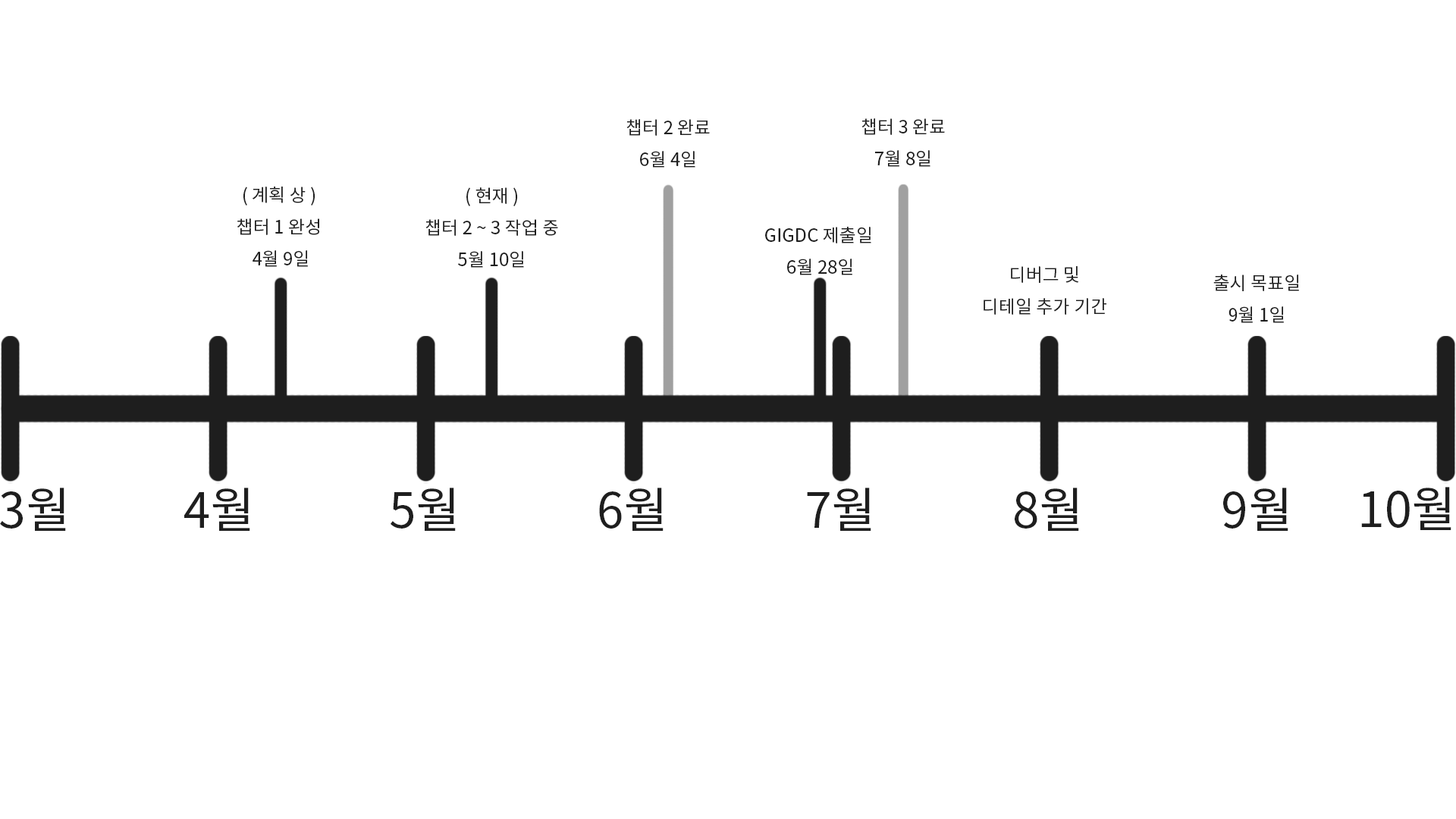
<style>
.page{position:relative;width:1456px;height:819px;background:#ffffff}
.page>*{position:absolute;margin:0}
.t1{font:18.2px "NotoSansCJKkr-Regular";color:#1e1e1e}
.t2{font:48.5px "NotoSansCJKkr-Regular";color:#1e1e1e}
</style>
<div class="page">
<p class="t1" style="left:626px;top:119px;width:84px;height:49px;text-align:center">챕터 2 완료<br>6월 4일</p>
<p class="t1" style="left:861px;top:118px;width:84px;height:49px;text-align:center">챕터 3 완료<br>7월 8일</p>
<p class="t1" style="left:237px;top:187px;width:82px;height:80px;text-align:center">( 계획 상 ) <br>챕터 1 완성 <br>4월 9일</p>
<p class="t1" style="left:425px;top:187px;width:133px;height:81px;text-align:center">( 현재 )<br>챕터 2 ~ 3 작업 중<br>5월 10일</p>
<p class="t1" style="left:765px;top:227px;width:106px;height:48px;text-align:center">GIGDC 제출일 <br>6월 28일</p>
<p class="t1" style="left:984px;top:266px;width:122px;height:49px;text-align:center">디버그 및 <br>디테일 추가 기간</p>
<p class="t1" style="left:1213px;top:275px;width:86px;height:48px;text-align:center">출시 목표일<br>9월 1일</p>
<p class="t2" style="left:0px;top:488px;width:66px;height:43px">3월</p>
<p class="t2" style="left:184px;top:488px;width:66px;height:43px">4월</p>
<p class="t2" style="left:391px;top:488px;width:65px;height:43px">5월</p>
<p class="t2" style="left:599px;top:488px;width:65px;height:43px">6월</p>
<p class="t2" style="left:807px;top:488px;width:64px;height:43px">7월</p>
<p class="t2" style="left:1015px;top:488px;width:64px;height:43px">8월</p>
<p class="t2" style="left:1223px;top:488px;width:65px;height:43px">9월</p>
<p class="t2" style="left:1361px;top:487px;width:90px;height:43px">10월</p>
</div>
